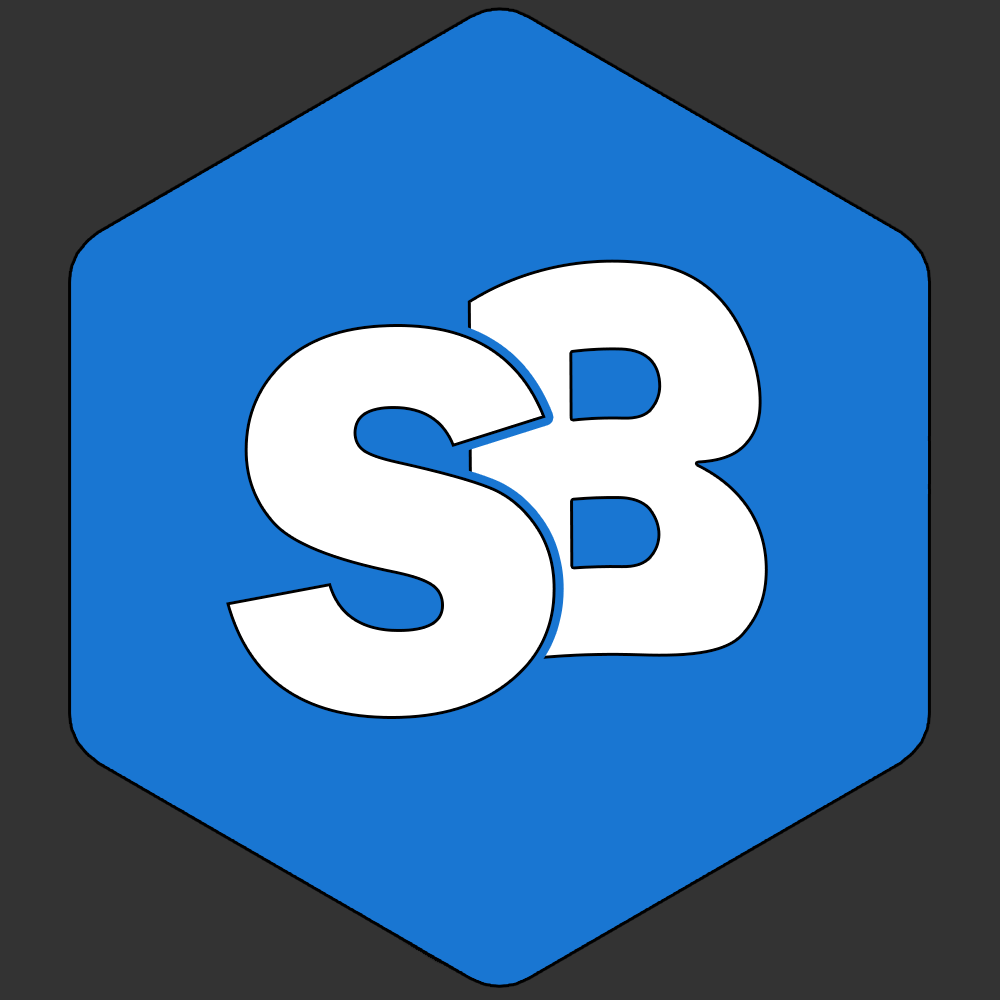
<style>
.page{position:relative;width:1000px;height:1000px;background:#1976d2}
.page>*{position:absolute;margin:0}
.t1{font:532.2px "FranklinGothic-Heavy";color:#ffffff}
.t2{font:575.4px "FranklinGothic-Heavy";color:#ffffff;scale:0.96 1}
</style>
<div class="page">
<p class="t1" style="left:467px;top:259px;width:301px;height:410px">B</p>
<p class="t2" style="left:226px;top:324px;width:330px;height:395px">S</p>
</div>
